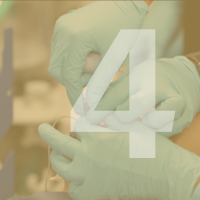
<style>
.page{position:relative;width:200px;height:200px}
.page>*{position:absolute;margin:0}
.t1{font:187.5px "PostGrotesk-Bold";color:#d0d4c1}
</style>
<div class="page">
<p class="t1" style="left:70px;top:29px;width:106px;height:129px">4</p>
</div>
